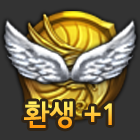
<style>
.page{position:relative;width:140px;height:140px;background:#333333}
.page>*{position:absolute;margin:0}
.t1{font:28.5px "JejuGothic"}
</style>
<div class="page">
<p class="t1" style="left:24px;top:101px;width:88px;height:28px">환생 +1</p>
</div>
